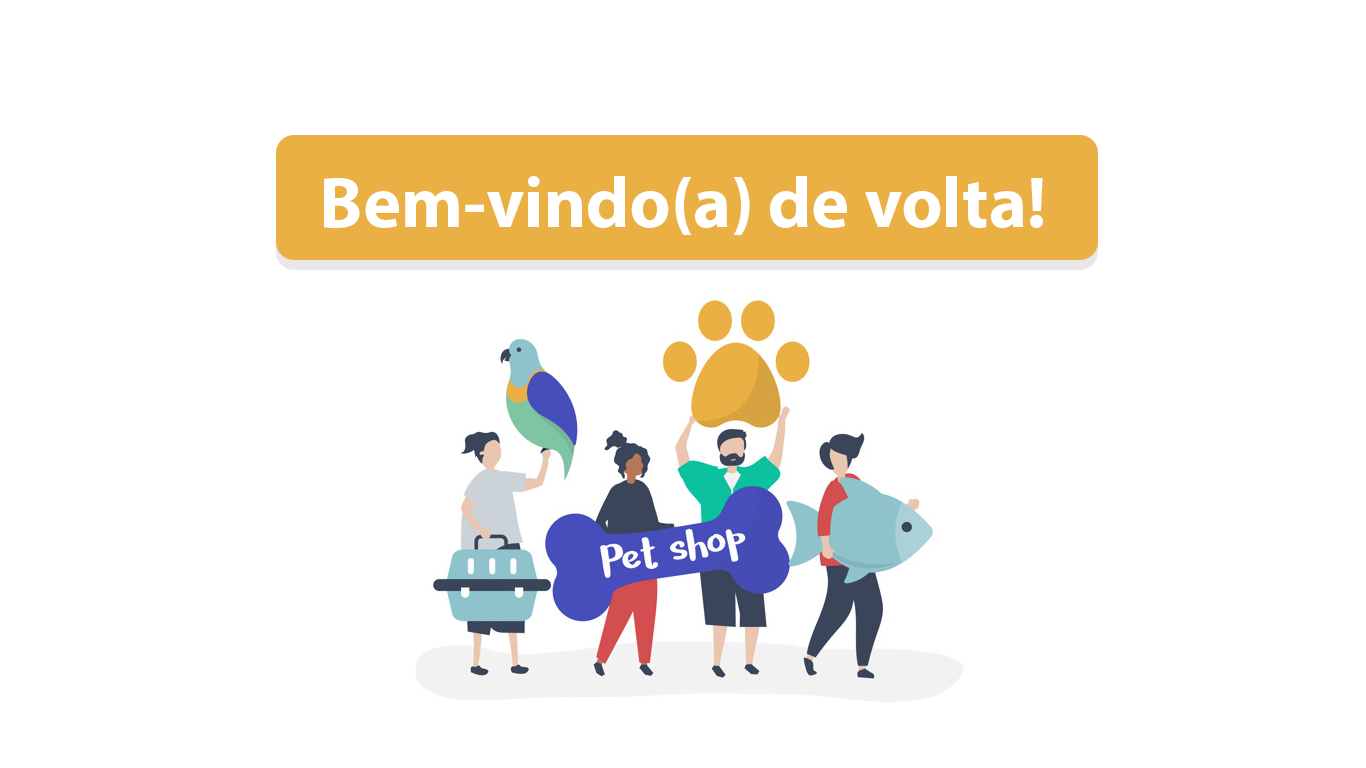
<style>
.page{position:relative;width:1366px;height:768px;background:#ffffff}
.page>*{position:absolute;margin:0}
.t1{font:72px "MyriadPro-Bold";color:#ffffff}
</style>
<div class="page">
<p class="t1" style="left:324px;top:176px;width:719px;height:59px">Bem-vindo(a) de volta!</p>
</div>
